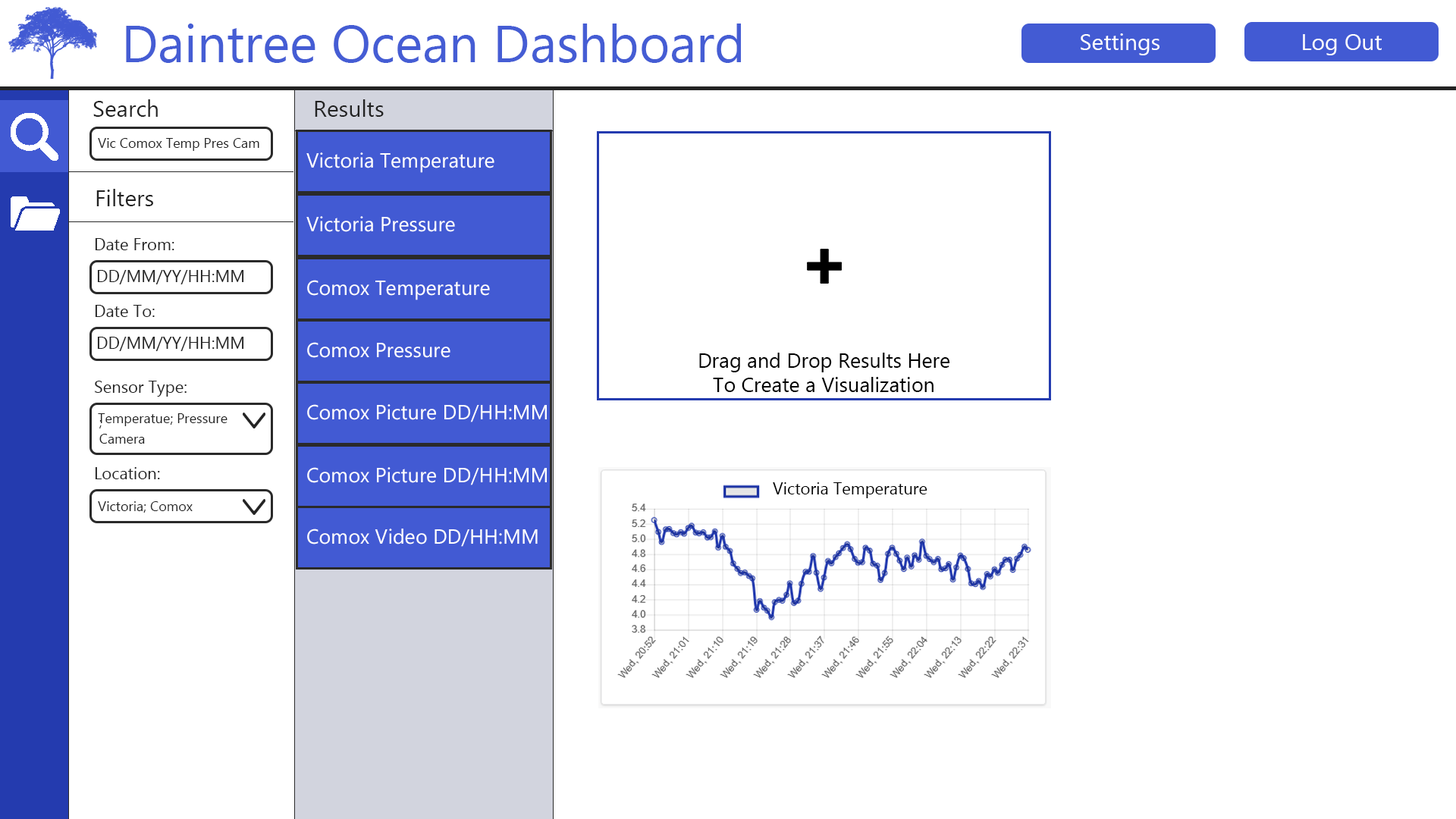
<style>
.page{position:relative;width:1456px;height:819px;background:#ffffff}
.page>*{position:absolute;margin:0}
.t1{font:52.3px "MyanmarText";color:#455dd4}
.t2{font:22.7px "MyanmarText";color:#ffffff}
.t3{font:22.7px "MyanmarText";color:#232323}
.t4{font:13.6px "MyanmarText";color:#232323}
.t5{font:20.5px "MyanmarText";color:#ffffff}
.t6{font:16.7px "MyanmarText";color:#232323}
.t7{font:20.5px "MyanmarText";color:#000000}
.t8{font:16.7px "MyanmarText";color:#000000}
</style>
<div class="page">
<p class="t1" style="left:126px;top:24px;width:615px;height:39px">Daintree Ocean Dashboard</p>
<p class="t2" style="left:1081px;top:33px;width:78px;height:22px">Settings</p>
<p class="t2" style="left:1303px;top:34px;width:79px;height:21px">Log Out</p>
<p class="t3" style="left:93px;top:99px;width:65px;height:18px">Search</p>
<p class="t3" style="left:315px;top:99px;width:69px;height:18px">Results</p>
<p class="t4" style="left:98px;top:138px;width:161px;height:13px">Vic Comox Temp Pres Cam</p>
<p class="t5" style="left:306px;top:152px;width:188px;height:21px">Victoria Temperature</p>
<p class="t3" style="left:96px;top:189px;width:57px;height:17px">Filters</p>
<p class="t5" style="left:306px;top:216px;width:149px;height:16px">Victoria Pressure</p>
<p class="t6" style="left:95px;top:238px;width:79px;height:12px">Date From:</p>
<p class="t6" style="left:97px;top:270px;width:147px;height:14px">DD/MM/YY/HH:MM</p>
<p class="t5" style="left:307px;top:280px;width:183px;height:20px">Comox Temperature</p>
<p class="t6" style="left:95px;top:305px;width:60px;height:12px">Date To:</p>
<p class="t6" style="left:97px;top:337px;width:147px;height:14px">DD/MM/YY/HH:MM</p>
<p class="t5" style="left:307px;top:342px;width:143px;height:16px">Comox Pressure</p>
<p class="t7" style="left:699px;top:353px;width:251px;height:39px;text-align:center">Drag and Drop Results Here<br>To Create a Visualization</p>
<p class="t6" style="left:95px;top:381px;width:92px;height:16px">Sensor Type:</p>
<p class="t4" style="left:98px;top:413px;width:129px;height:13px">Temperatue; Pressure</p>
<p class="t5" style="left:307px;top:404px;width:240px;height:18px">Comox Picture DD/HH:MM</p>
<p class="t4" style="left:99px;top:420px;width:46px;height:24px">;<br>Camera</p>
<p class="t6" style="left:95px;top:467px;width:65px;height:12px">Location:</p>
<p class="t5" style="left:307px;top:467px;width:240px;height:18px">Comox Picture DD/HH:MM</p>
<p class="t8" style="left:773px;top:482px;width:154px;height:16px">Victoria Temperature</p>
<p class="t4" style="left:98px;top:501px;width:95px;height:12px">Victoria; Comox</p>
<p class="t5" style="left:307px;top:529px;width:231px;height:18px">Comox Video DD/HH:MM</p>
</div>
